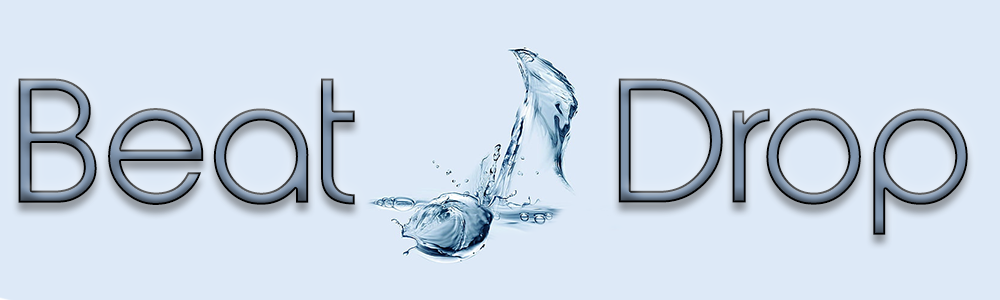
<style>
.page{position:relative;width:1000px;height:300px;background:#dde9f7}
.page>*{position:absolute;margin:0}
.t1{font:160.9px "AbeatbyKai"}
</style>
<div class="page">
<p class="t1" style="left:18px;top:78px;width:337px;height:127px">Beat</p>
<p class="t1" style="left:618px;top:78px;width:350px;height:157px">Drop</p>
</div>
